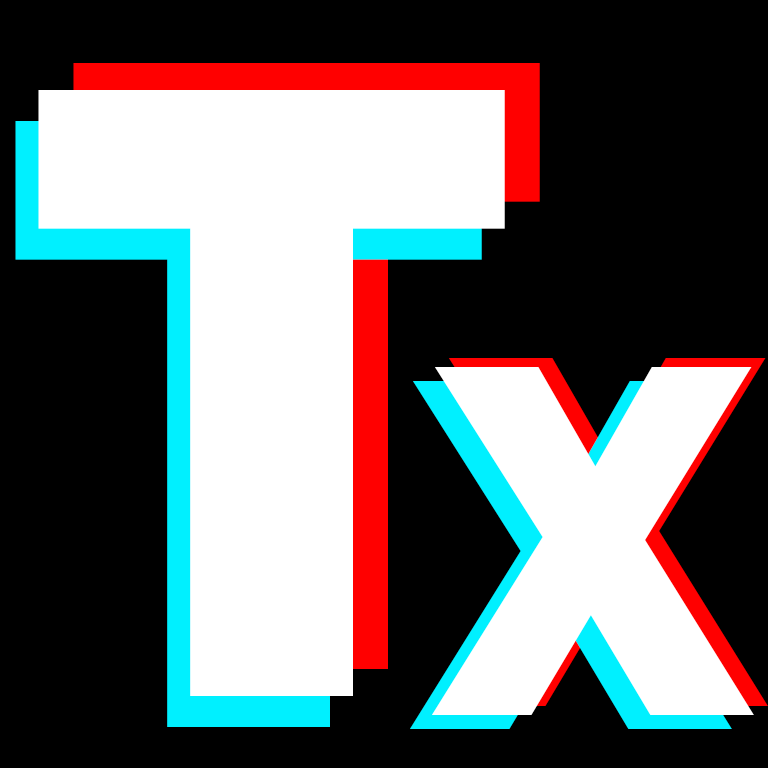
<style>
.page{position:relative;width:768px;height:768px;background:#000000}
.page>*{position:absolute;margin:0}
.t1{font:866.3px "Industry-Ultra";color:#ffffff}
.t2{font:496.6px "Industry-Ultra";color:#ffffff}
</style>
<div class="page">
<p class="t1" style="left:73px;top:63px;width:467px;height:606px">T</p>
<p class="t1" style="left:38px;top:90px;width:467px;height:606px">T</p>
<p class="t1" style="left:15px;top:121px;width:467px;height:606px">T</p>
<p class="t2" style="left:446px;top:358px;width:322px;height:348px">X</p>
<p class="t2" style="left:432px;top:367px;width:322px;height:348px">X</p>
<p class="t2" style="left:410px;top:381px;width:322px;height:348px">X</p>
</div>
